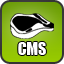
<style>
.page{position:relative;width:64px;height:64px}
.page>*{position:absolute;margin:0}
.t1{font:16px "Impact";color:#ffffff}
</style>
<div class="page">
<p class="t1" style="left:18px;top:42px;width:28px;height:13px">CMS</p>
</div>
